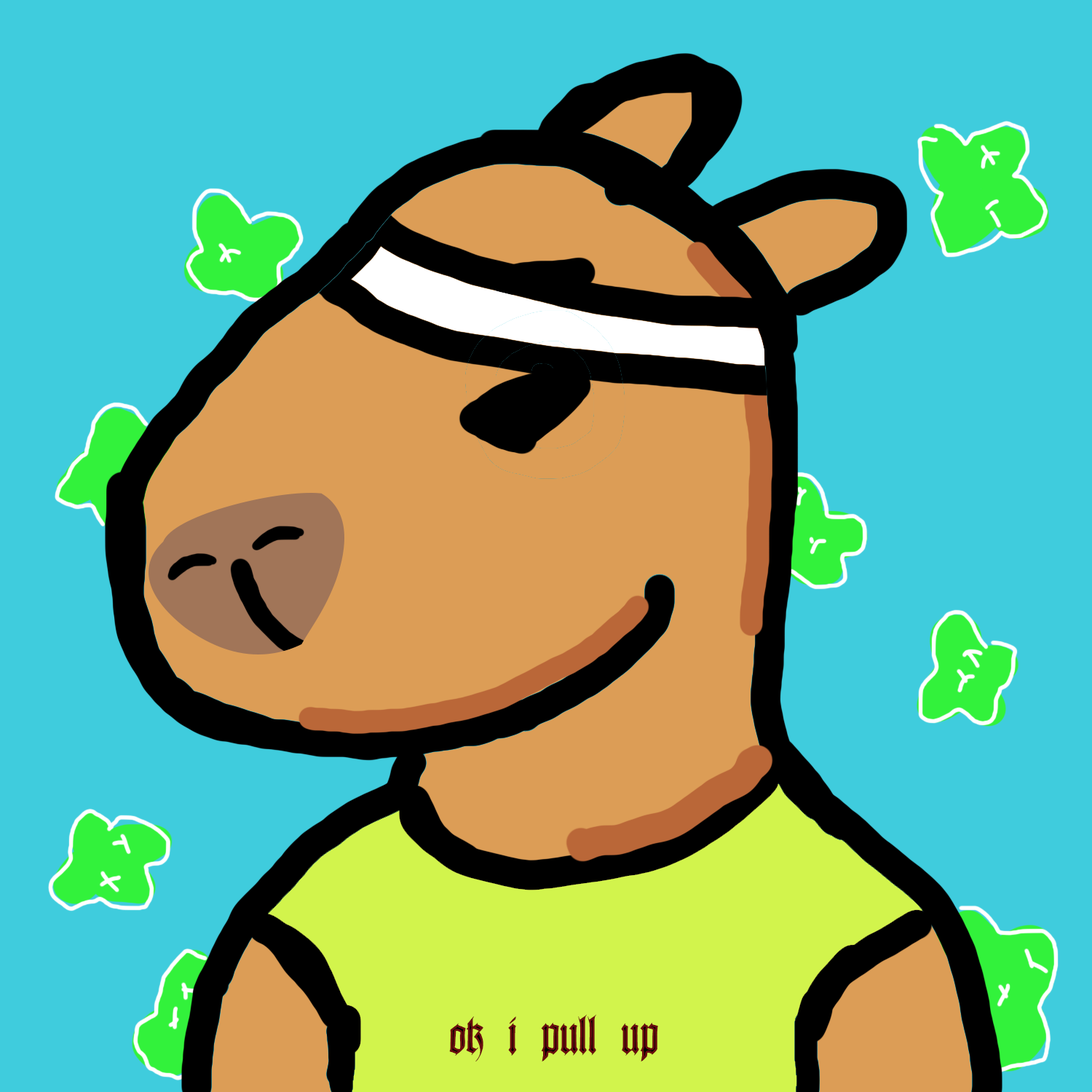
<style>
.page{position:relative;width:1092px;height:1092px;background:#3fccdd}
.page>*{position:absolute;margin:0}
.t1{font:48.5px "Killigrew";color:#690e0e}
</style>
<div class="page">
<p class="t1" style="left:449px;top:1014px;width:209px;height:48px">ok i pull up</p>
</div>
